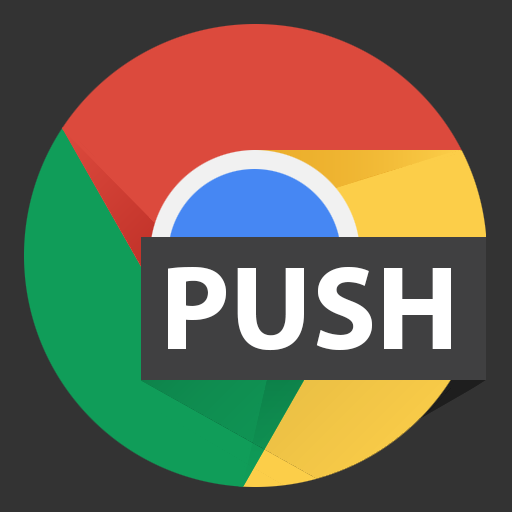
<style>
.page{position:relative;width:512px;height:512px;background:#333333}
.page>*{position:absolute;margin:0}
.t1{font:120px "MyriadPro-Bold";color:#ffffff}
</style>
<div class="page">
<p class="t1" style="left:168px;top:267px;width:283px;height:84px">PUSH</p>
</div>
